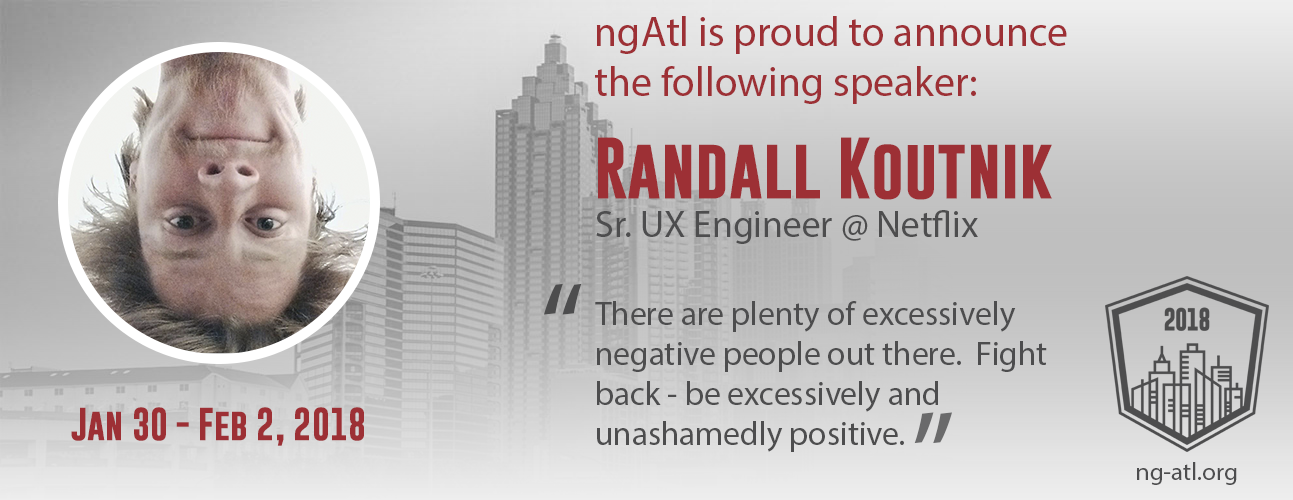
<style>
.page{position:relative;width:1293px;height:500px}
.page>*{position:absolute;margin:0}
.t1{font:41.7px "MyriadPro-Regular";color:#9d3035}
.t2{font:62.5px "GoboldBold";color:#9d3035}
.t3{font:37.5px "MyriadPro-Regular";color:#4d4d4e}
.t4{font:125px "MyriadPro-Regular";color:#4d4d4e}
.t5{font:33.3px "MyriadPro-Regular";color:#4d4d4e}
.t6{font:33.3px "GoboldBold";color:#9d3035}
.t7{font:125px "MyriadPro-Regular";color:#6a6a6b}
.t8{font:25px "MyriadPro-Regular";color:#4d4d4e}
</style>
<div class="page">
<p class="t1" style="left:595px;top:16px;width:472px;height:88px">ngAtl is proud to announce the following speaker:</p>
<p class="t2" style="left:598px;top:137px;width:454px;height:63px">Randall Koutnik</p>
<p class="t3" style="left:596px;top:210px;width:382px;height:34px">Sr. UX Engineer @ Netflix</p>
<p class="t4" style="left:544px;top:283px;width:38px;height:32px">“</p>
<p class="t5" style="left:595px;top:301px;width:452px;height:151px">There are plenty of excessively negative people out there.  Fight back - be excessively and unashamedly positive.</p>
<p class="t6" style="left:71px;top:407px;width:293px;height:39px">Jan 30 - Feb 2, 2018</p>
<p class="t7" style="left:914px;top:412px;width:38px;height:32px;rotate:180deg">“</p>
<p class="t8" style="left:1137px;top:462px;width:100px;height:23px">ng-atl.org</p>
</div>
